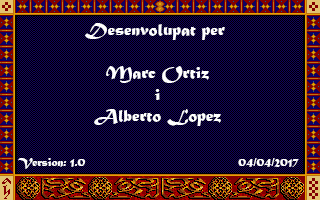
<style>
.page{position:relative;width:320px;height:200px;background:#100061}
.page>*{position:absolute;margin:0}
.t1{font:18px "MaturaMTScriptCapitals";color:#fefefe}
.t2{font:12px "MaturaMTScriptCapitals";color:#fefefe}
</style>
<div class="page">
<p class="t1" style="left:85px;top:23px;width:140px;height:103px;text-align:center">Desenvolupat per <br><br>Marc Ortiz<br>i<br>Alberto Lopez</p>
<p class="t2" style="left:18px;top:158px;width:68px;height:11px">Version: 1.0</p>
<p class="t2" style="left:238px;top:158px;width:61px;height:9px">04/04/2017</p>
</div>
